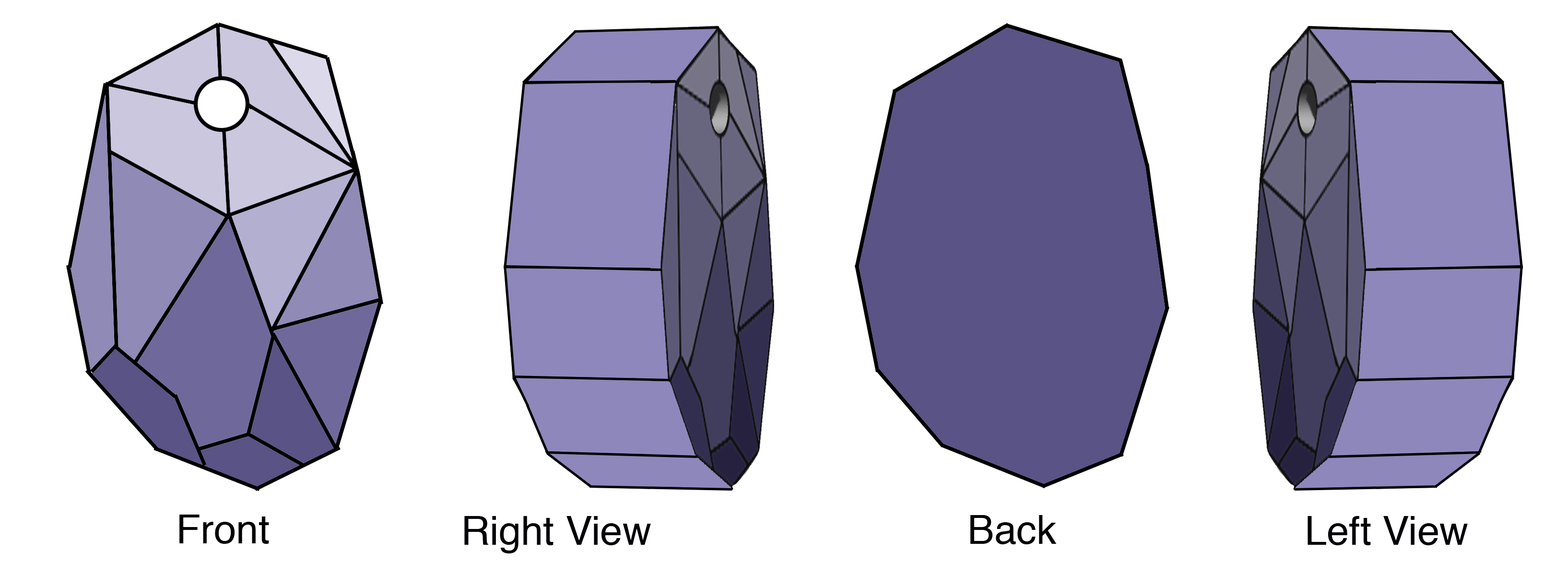
<style>
.page{position:relative;width:1568px;height:575px;background:#ffffff}
.page>*{position:absolute;margin:0}
.t1{font:40px "Helvetica";color:#000000}
.t2{font:40px "Helvetica";color:#010005}
</style>
<div class="page">
<p class="t1" style="left:179px;top:515px;width:90px;height:29px">Front</p>
<p class="t2" style="left:464px;top:516px;width:187px;height:38px">Right View</p>
<p class="t1" style="left:970px;top:515px;width:87px;height:29px">Back</p>
<p class="t2" style="left:1308px;top:516px;width:160px;height:29px">Left View</p>
</div>
